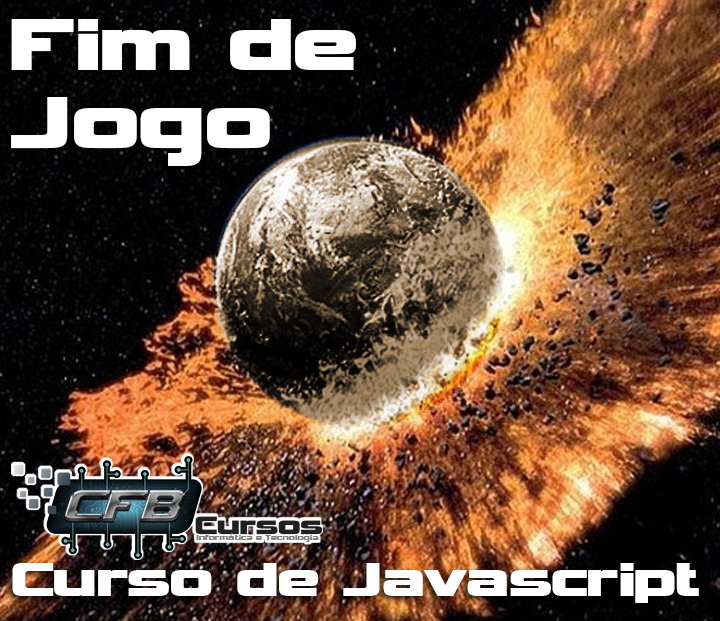
<style>
.page{position:relative;width:720px;height:621px}
.page>*{position:absolute;margin:0}
.t1{font:103.7px/77.8px "Vipnagorgialla";color:#ffffff}
.t2{font:9.8px "Vipnagorgialla";color:#828282}
.t3{font:66.7px "Vipnagorgialla";color:#ffffff}
</style>
<div class="page">
<p class="t1" style="left:11px;top:19px;width:345px;height:147px">Fim de<br>Jogo</p>
<p class="t2" style="left:196px;top:534px;width:123px;height:8px">Informática e Tecnologia</p>
<p class="t3" style="left:12px;top:563px;width:687px;height:40px">Curso de Javascript</p>
</div>
